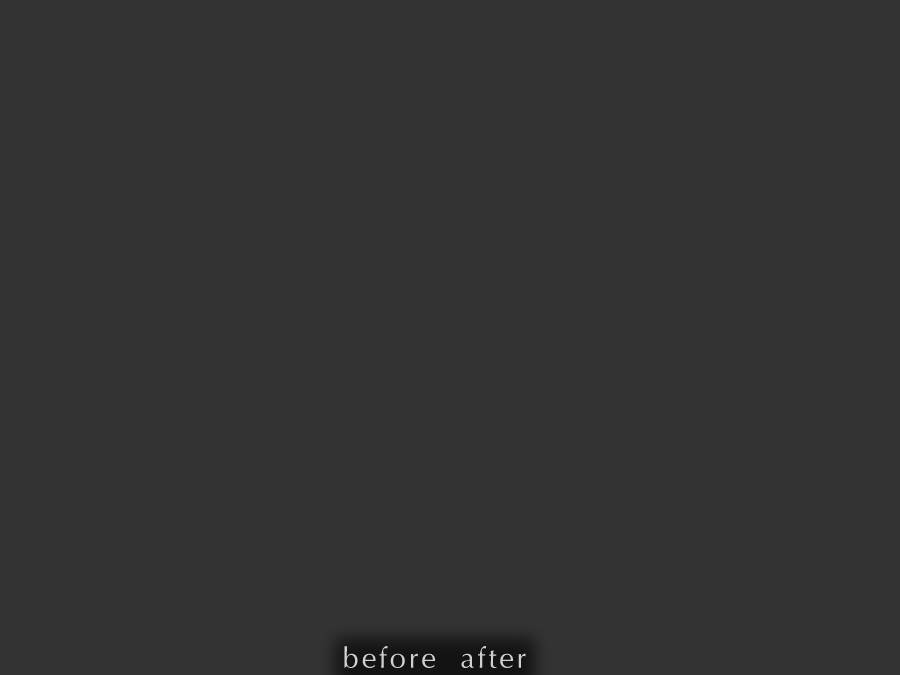
<style>
.page{position:relative;width:900px;height:675px;background:#333333}
.page>*{position:absolute;margin:0}
.t1{font:28.8px "Optima-Regular";letter-spacing:0.1em;color:#d0d0d0}
</style>
<div class="page">
<p class="t1" style="left:344px;top:646px;width:182px;height:22px">before  after</p>
</div>
